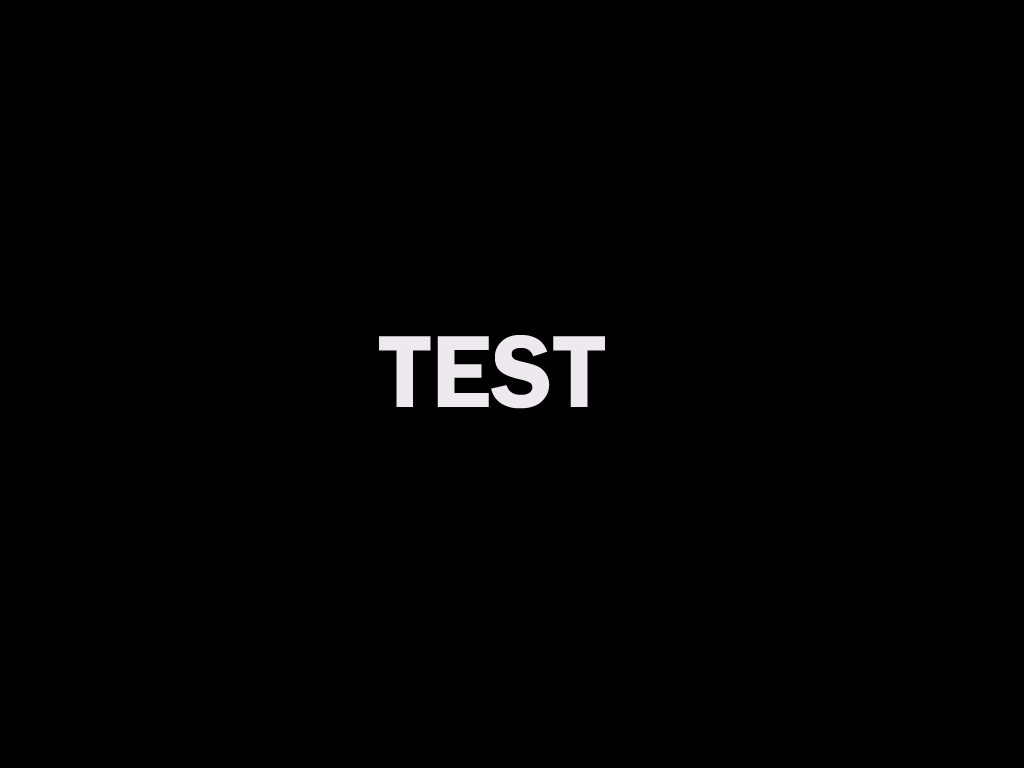
<style>
.page{position:relative;width:1024px;height:768px;background:#000000}
.page>*{position:absolute;margin:0}
.t1{font:106px "FranklinGothic-Demi";color:#ede9ef}
</style>
<div class="page">
<p class="t1" style="left:379px;top:335px;width:226px;height:74px">TEST</p>
</div>
